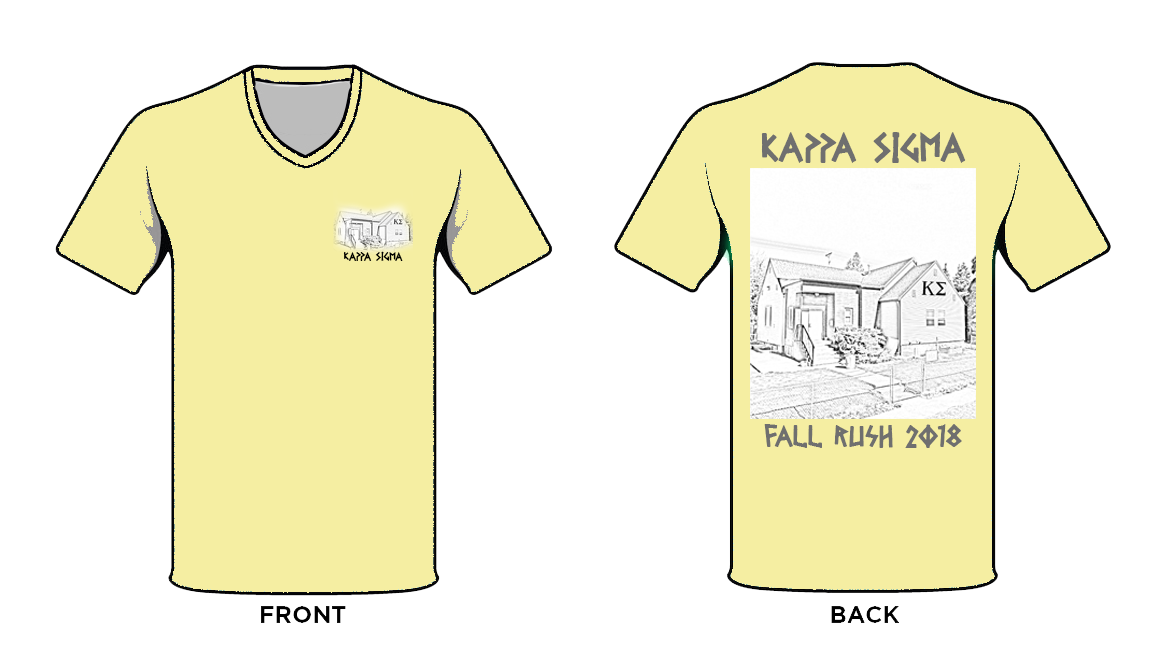
<style>
.page{position:relative;width:1172px;height:649px;background:#ffffff}
.page>*{position:absolute;margin:0}
.t1{font:41px "GelioRetsina";color:#6f6f6f}
.t2{font:11.8px "GelioRetsina";color:#000000}
.t3{font:30px "GelioRetsina";color:#6f6f6f}
</style>
<div class="page">
<p class="t1" style="left:761px;top:132px;width:205px;height:31px">Kappa Sigma</p>
<p class="t2" style="left:343px;top:251px;width:60px;height:10px">Kappa Sigma</p>
<p class="t3" style="left:764px;top:424px;width:198px;height:24px">Fall Rush 2018</p>
</div>
